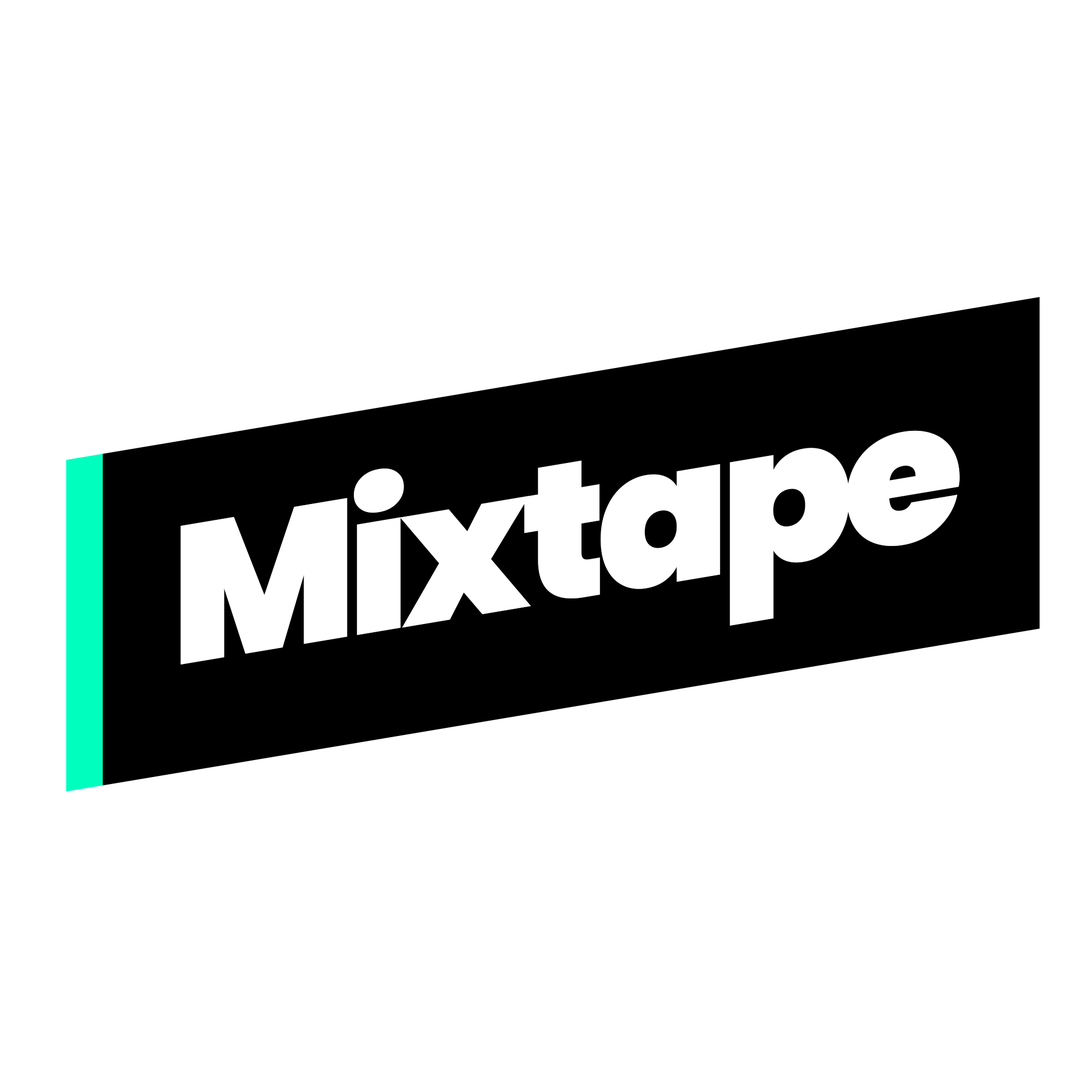
<style>
.page{position:relative;width:1092px;height:1092px;background:#ffffff}
.page>*{position:absolute;margin:0}
.t1{font:195.8px "Poppins-Black";letter-spacing:-0.05em;color:#ffffff}
</style>
<div class="page">
<p class="t1" style="left:180px;top:430px;width:780px;height:235px;rotate:-10deg">Mixtape</p>
</div>
